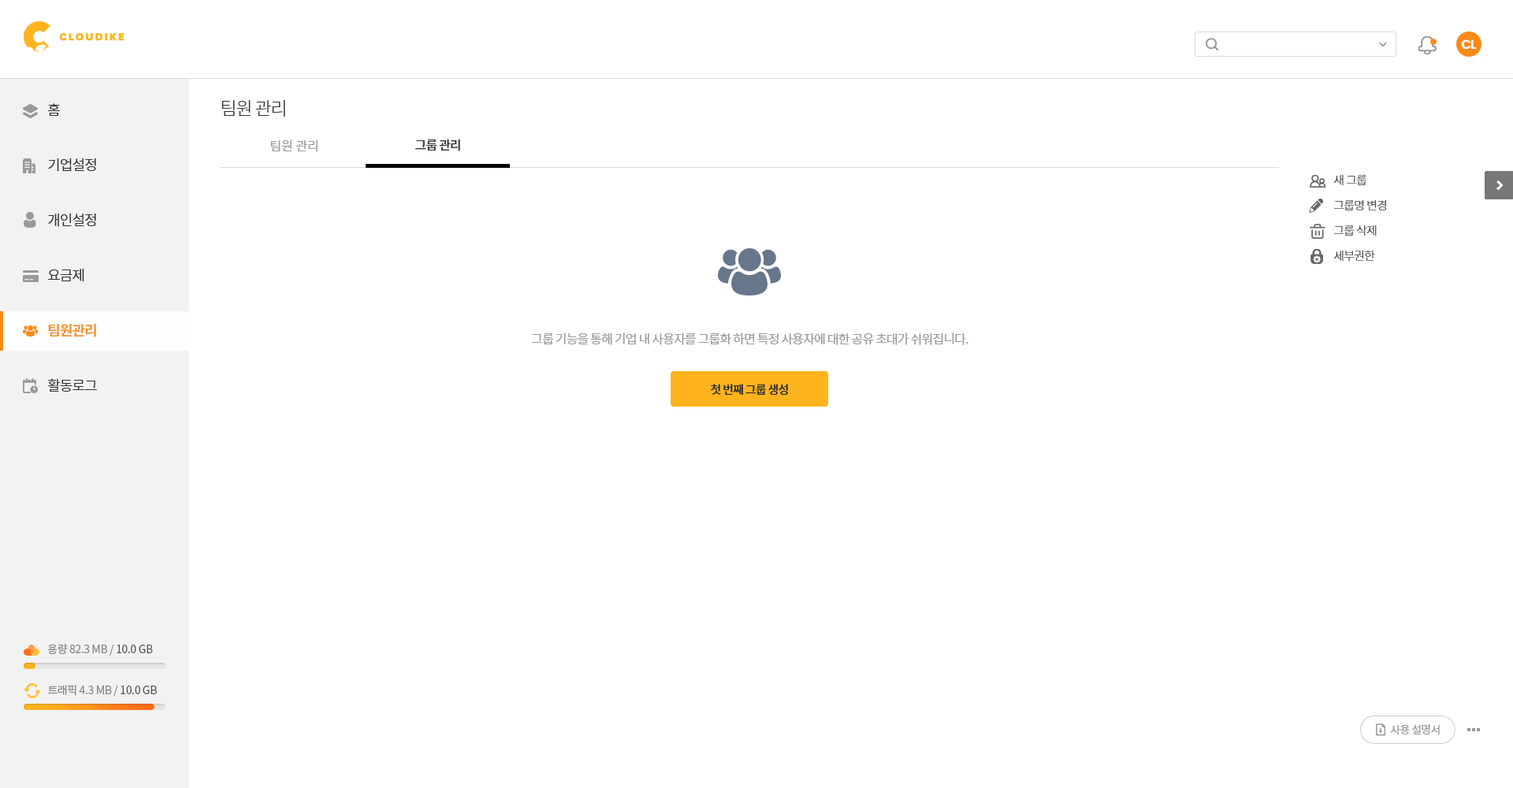
<style>
.page{position:relative;width:1513px;height:788px;background:#ffffff}
.page>*{position:absolute;margin:0}
.t1{font:12.6px "Poppins-SemiBold";letter-spacing:-0.05em;color:#ffffff}
.t2{font:18.1px "NotoSansCJKkr-Light";letter-spacing:-0.05em;color:#333333}
.t3{font:14.2px/55.2px "NotoSansCJKkr-DemiLight";letter-spacing:-0.05em;color:#333333}
.t4{font:14.2px/55.2px "NotoSansCJKkr-Medium";letter-spacing:-0.05em;color:#f98a17}
.t5{font:12.6px "NotoSansCJKkr-DemiLight";color:#999999}
.t6{font:12.6px "NotoSansCJKkr-Medium";letter-spacing:-0.05em;color:#333333}
.t7{font:11.8px/25.2px "NotoSansCJKkr-Light";letter-spacing:-0.05em;color:#333333}
.t8{font:12.6px "NotoSansCJKkr-DemiLight";letter-spacing:-0.05em;color:#999999}
.t9{font:11.8px "NotoSansCJKkr-Medium";letter-spacing:-0.05em;color:#2d2d2d}
.t10{font:11px "NotoSansCJKkr-Regular";letter-spacing:-0.025em;color:#888888}
.t11{font:11px "NotoSansCJKkr-Regular";letter-spacing:-0.025em;color:#585858}
.t12{font:11px "NotoSansCJKkr-Regular";letter-spacing:-0.05em;color:#999999}
</style>
<div class="page">
<p class="t1" style="left:1461px;top:39px;width:16px;height:10px">CL</p>
<p class="t2" style="left:221px;top:99px;width:64px;height:18px">팀원 관리</p>
<p class="t3" style="left:48px;top:103px;width:49px;height:289px">홈<br>기업설정<br>개인설정<br>요금제<br><span class="t4">팀원관리<br></span>활동로그</p>
<p class="t5" style="left:271px;top:139px;width:47px;height:13px">팀원 관리</p>
<p class="t6" style="left:415px;top:139px;width:45px;height:12px">그룹 관리</p>
<p class="t7" style="left:1333px;top:174px;width:53px;height:88px">새 그룹<br>그룹명 변경<br>그룹 삭제<br>세부권한</p>
<p class="t8" style="left:531px;top:333px;width:438px;height:12px">그룹 기능을 통해 기업 내 사용자를 그룹화 하면 특정 사용자에 대한 공유 초대가 쉬워집니다.</p>
<p class="t9" style="left:711px;top:384px;width:77px;height:12px">첫 번째 그룹 생성</p>
<p class="t10" style="left:47px;top:644px;width:106px;height:12px">용량 82.3 MB / <span class="t11">10.0 GB</span></p>
<p class="t10" style="left:48px;top:685px;width:109px;height:12px">트래픽 4.3 MB / <span class="t11">10.0 GB</span></p>
<p class="t12" style="left:1390px;top:724px;width:50px;height:11px">사용 설명서</p>
</div>
